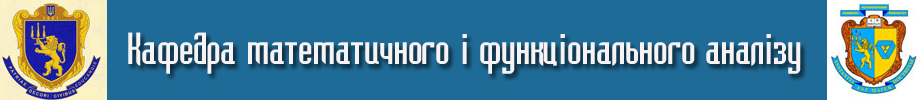
<style>
.page{position:relative;width:920px;height:100px;background:#1f6b97}
.page>*{position:absolute;margin:0}
.t1{font:41.3px "Bedrock-Cyr-Regular";color:#f7f3f4}
.t2{font:41.3px "BellMT";color:#f7f3f4}
.t3{font:41.3px "Tahoma";color:#f7f3f4}
</style>
<div class="page">
<p class="t1" style="left:128px;top:32px;width:673px;height:42px"><span class="t2"> </span>Кафедра математичного <span class="t3">і </span>функц<span class="t3">і</span>онального анал<span class="t3">і</span>зу</p>
</div>
